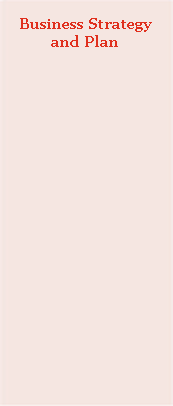
<style>
.page{position:relative;width:173px;height:406px;background:#f5e6e1}
.page>*{position:absolute;margin:0}
.t1{font:15px "Georgia-Bold";color:#e0301e}
</style>
<div class="page">
<p class="t1" style="left:20px;top:18px;width:132px;height:29px;text-align:center">Business Strategy and Plan</p>
</div>
